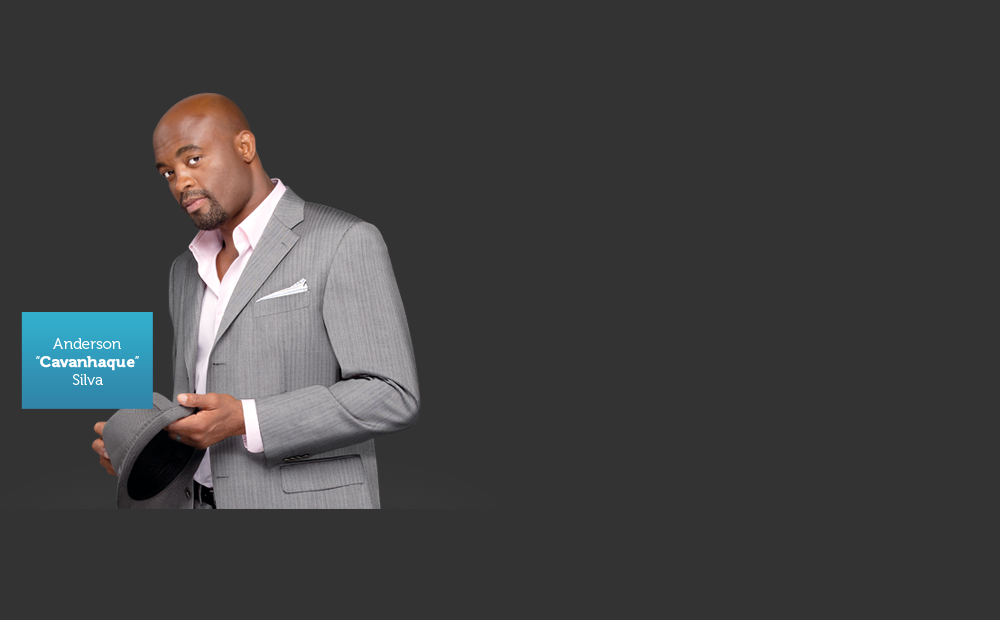
<style>
.page{position:relative;width:1000px;height:620px;background:#333333}
.page>*{position:absolute;margin:0}
.t1{font:15.2px/18.2px "Museo-300";color:#ffffff}
.t2{font:15.2px/18.2px "Museo-700";color:#ffffff;font-weight:bold}
</style>
<div class="page">
<p class="t1" style="left:36px;top:338px;width:103px;height:47px;text-align:center">Anderson<br>“<span class="t2">Cavanhaque</span>”<br>Silva</p>
</div>
